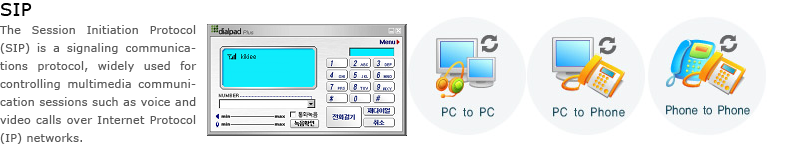
<style>
.page{position:relative;width:800px;height:160px;background:#ffffff}
.page>*{position:absolute;margin:0}
.t1{font:11px/18px "Verdana";letter-spacing:0.025em;color:#5a5a5a}
.t2{font:18px/18px "Verdana";letter-spacing:0.025em;color:#010101}
</style>
<div class="page">
<p class="t1" style="left:0px;top:3px;width:197px;height:141px;text-align:justify"><span class="t2">SIP<br></span>The Session Initiation Protocol (SIP) is a signaling communications protocol, widely used for controlling multimedia communication sessions such as voice and video calls over Internet Protocol (IP) networks.</p>
</div>
